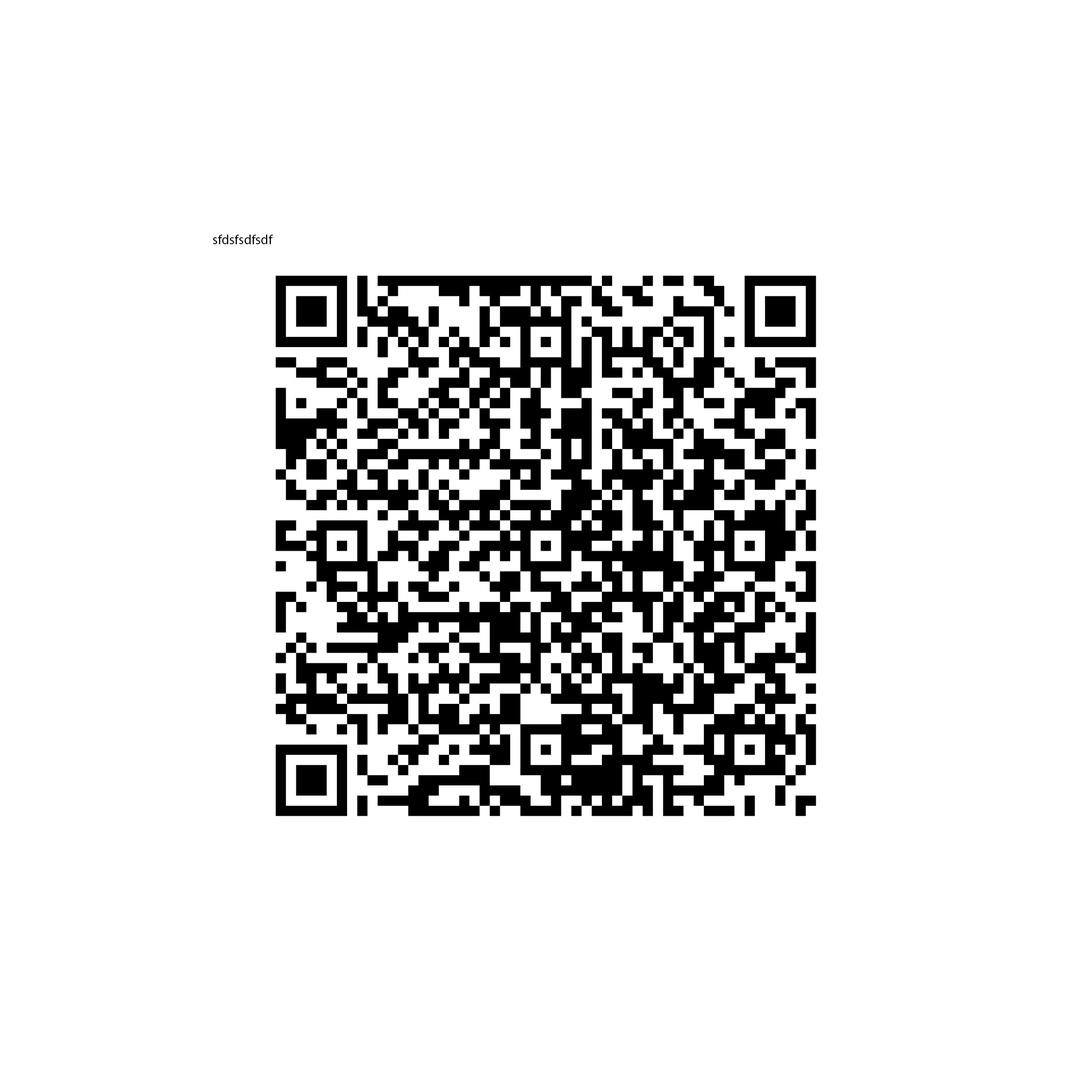
<style>
.page{position:relative;width:1092px;height:1092px;background:#ffffff}
.page>*{position:absolute;margin:0}
.t1{font:13.6px "MyriadPro-Regular";color:#000000}
</style>
<div class="page">
<p class="t1" style="left:213px;top:235px;width:60px;height:9px">sfdsfsdfsdf</p>
</div>
